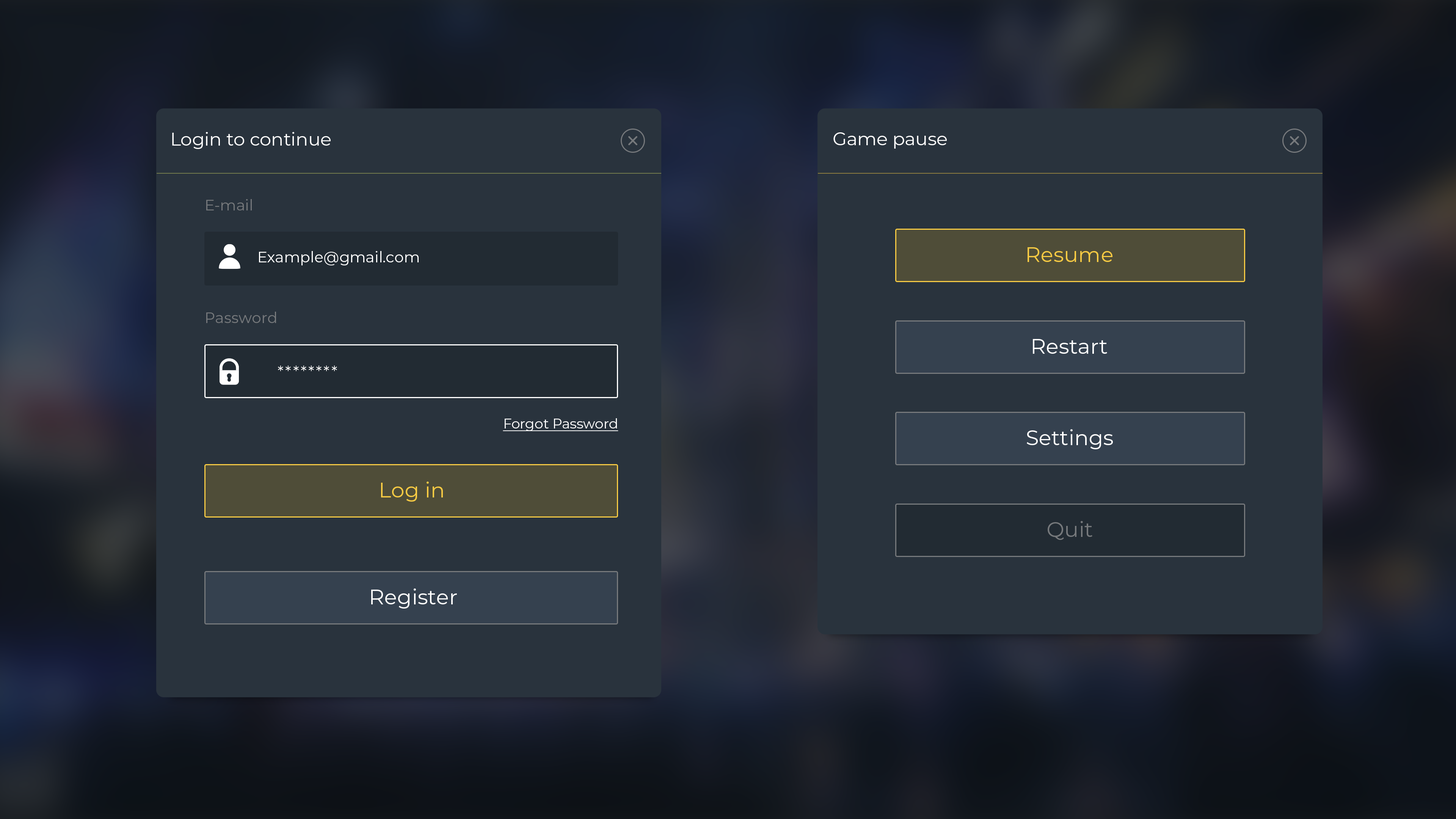
<style>
.page{position:relative;width:1456px;height:819px;background:#29333d}
.page>*{position:absolute;margin:0}
.t1{font:18.2px "Montserrat-Regular";color:#ffffff}
.t2{font:15.2px "Montserrat-Regular";color:#76797c}
.t3{font:15.2px "Montserrat-Regular";color:#ffffff}
.t4{font:21.2px "Montserrat-Regular";color:#f6ca43}
.t5{font:21.2px "Montserrat-Regular";color:#ffffff}
.t6{font:15.2px "Montserrat-Regular";letter-spacing:0.1em;color:#ffffff}
.t7{font:13.6px "Montserrat-Regular";color:#ffffff;text-decoration:underline}
.t8{font:21.2px "Montserrat-Regular";color:#76797c}
</style>
<div class="page">
<p class="t1" style="left:172px;top:132px;width:159px;height:17px">Login to continue</p>
<p class="t1" style="left:833px;top:132px;width:114px;height:17px">Game pause</p>
<p class="t2" style="left:206px;top:199px;width:46px;height:11px">E-mail</p>
<p class="t3" style="left:259px;top:251px;width:160px;height:14px">Example@gmail.com</p>
<p class="t4" style="left:1028px;top:247px;width:84px;height:15px">Resume</p>
<p class="t2" style="left:206px;top:312px;width:70px;height:11px">Password</p>
<p class="t5" style="left:1033px;top:339px;width:74px;height:15px">Restart</p>
<p class="t6" style="left:278px;top:366px;width:59px;height:5px">********</p>
<p class="t7" style="left:503px;top:418px;width:115px;height:13px">Forgot Password</p>
<p class="t5" style="left:1027px;top:429px;width:86px;height:20px">Settings</p>
<p class="t4" style="left:381px;top:482px;width:62px;height:20px">Log in</p>
<p class="t8" style="left:1048px;top:521px;width:44px;height:19px">Quit</p>
<p class="t5" style="left:371px;top:588px;width:86px;height:21px">Register</p>
</div>
